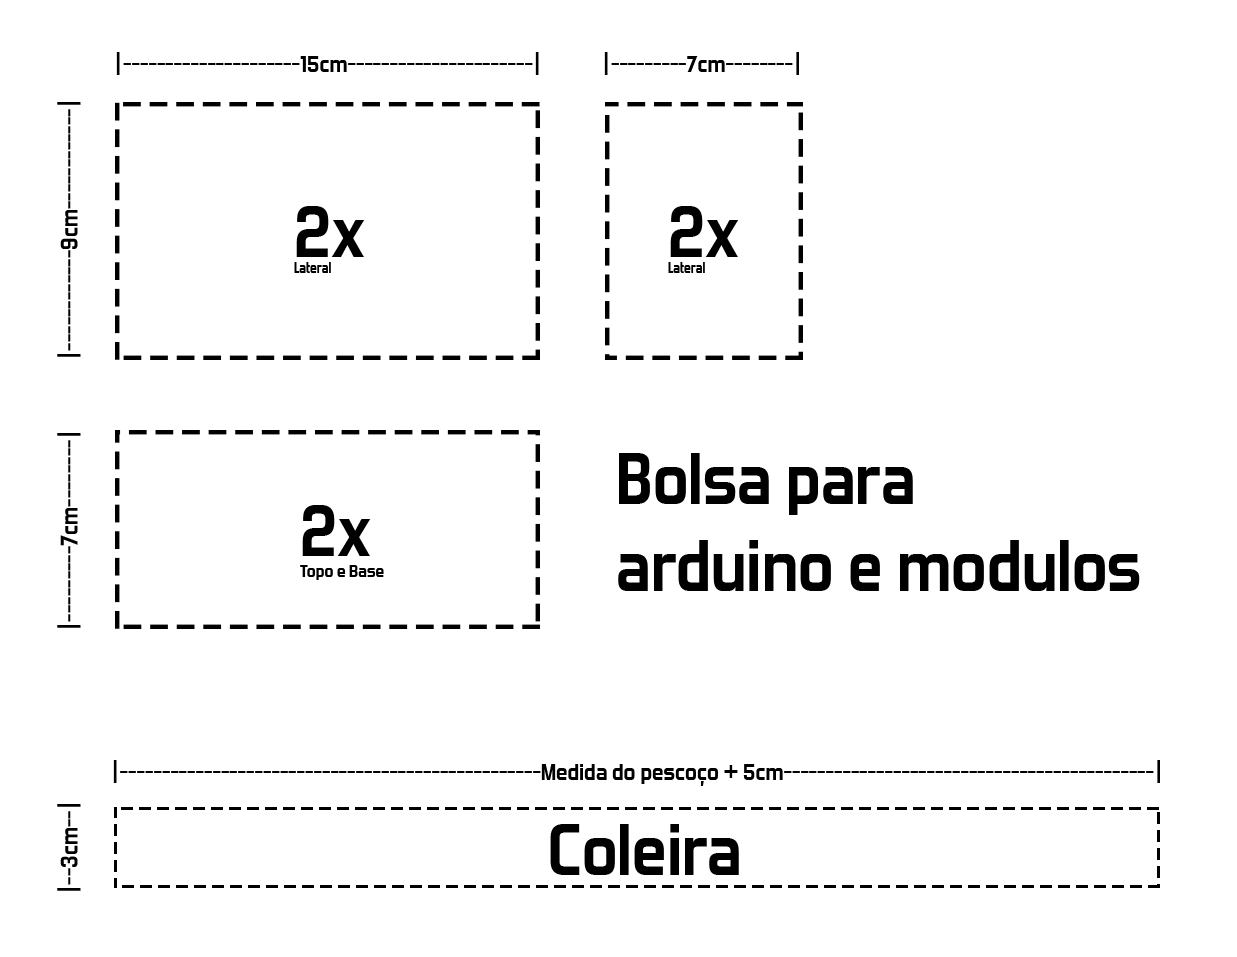
<style>
.page{position:relative;width:1237px;height:957px;background:#ffffff}
.page>*{position:absolute;margin:0}
.t1{font:24px "ForgottenFuturistRg-Bold";color:#000000}
.t2{font:14px "ForgottenFuturistRg-Bold";color:#000000}
.t3{font:72px "ForgottenFuturistRg-Bold";color:#000000}
.t4{font:18px "ForgottenFuturistRg-Bold";color:#000000}
</style>
<div class="page">
<p class="t1" style="left:116px;top:52px;width:423px;height:23px">|---------------------15cm----------------------|</p>
<p class="t1" style="left:604px;top:52px;width:195px;height:23px">|---------7cm--------|</p>
<p class="t1" style="left:57px;top:102px;width:24px;height:255px;rotate:-90deg">|------------9cm------------|</p>
<p class="t2" style="left:294px;top:206px;width:71px;height:67px"><span class="t3">2x</span><br>Lateral</p>
<p class="t2" style="left:668px;top:206px;width:71px;height:67px"><span class="t3">2x</span><br>Lateral</p>
<p class="t1" style="left:57px;top:433px;width:24px;height:195px;rotate:-90deg">|---------7cm--------|</p>
<p class="t3" style="left:618px;top:453px;width:522px;height:138px">Bolsa para <br>arduino e modulos</p>
<p class="t4" style="left:300px;top:505px;width:84px;height:75px"><span class="t3">2x</span><br>Topo e Base</p>
<p class="t1" style="left:113px;top:760px;width:1047px;height:26px">|--------------------------------------------------Medida do pescoço + 5cm--------------------------------------------|</p>
<p class="t1" style="left:57px;top:804px;width:24px;height:87px;rotate:-90deg">|--3cm--|</p>
<p class="t3" style="left:550px;top:824px;width:189px;height:51px">Coleira</p>
</div>
